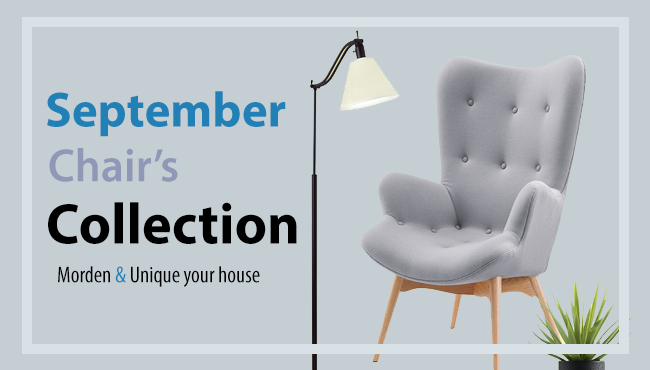
<style>
.page{position:relative;width:650px;height:370px;background:#c4ced3}
.page>*{position:absolute;margin:0}
.t1{font:49.7px "MyriadPro-Bold";color:#2180b6}
.t2{font:46.9px "MyriadPro-Semibold";color:#9098b7}
.t3{font:58px "MyriadPro-Bold";color:#000000}
.t4{font:23px "MyriadPro-Cond";color:#000000}
.t5{font:23px "MyriadPro-Cond";color:#2180b6}
</style>
<div class="page">
<p class="t1" style="left:47px;top:91px;width:239px;height:46px">September</p>
<p class="t2" style="left:49px;top:148px;width:129px;height:34px">Chair’s</p>
<p class="t3" style="left:48px;top:202px;width:249px;height:42px">Collection</p>
<p class="t4" style="left:58px;top:266px;width:202px;height:21px">Morden <span class="t5">&amp; </span>Unique your house</p>
</div>
